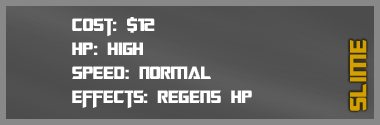
<style>
.page{position:relative;width:380px;height:125px}
.page>*{position:absolute;margin:0}
.t1{font:20px "TransformersMovie";color:#ffffff}
.t2{font:20px "TransformersMovie";letter-spacing:0.04em;color:#ffffff}
.t3{font:20px "TransformersMovie";letter-spacing:0.02em;color:#ffffff}
.t4{font:26px "TransformersMovie";letter-spacing:0.04em;color:#d49f00}
</style>
<div class="page">
<p class="t1" style="left:72px;top:17px;width:180px;height:92px">Cost: $12<br>h<span class="t2">p</span>: <span class="t3">h</span>igh<br>Spee<span class="t2">d</span>: normal<br>effects: re<span class="t3">g</span>ens hp</p>
<p class="t4" style="left:350px;top:39px;width:17px;height:72px;rotate:-90deg">slime</p>
</div>
